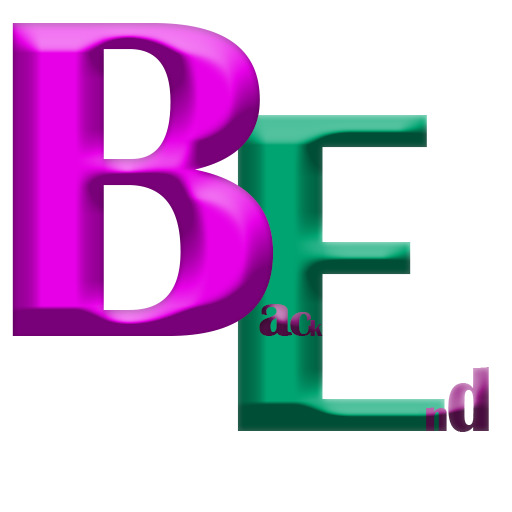
<style>
.page{position:relative;width:512px;height:512px;background:#ffffff}
.page>*{position:absolute;margin:0}
.t1{font:470px "BritannicBold";letter-spacing:-0.05em}
.t2{font:63.4px "BritannicBold";letter-spacing:-0.05em}
.t3{font:48px "BritannicBold";letter-spacing:-0.05em}
.t4{font:24px "BritannicBold";letter-spacing:-0.05em}
.t5{font:473.6px "BritannicBold";letter-spacing:-0.05em;scale:0.92 1}
.t6{font:47.4px "BritannicBold";letter-spacing:-0.05em;scale:0.92 1}
.t7{font:94.7px "BritannicBold";letter-spacing:-0.05em;scale:0.92 1}
</style>
<div class="page">
<p class="t1" style="left:12px;top:23px;width:311px;height:313px">B<span class="t2">a</span><span class="t3">c</span><span class="t4">k</span></p>
<p class="t5" style="left:237px;top:115px;width:252px;height:317px">E<span class="t6">n</span><span class="t7">d</span></p>
</div>
